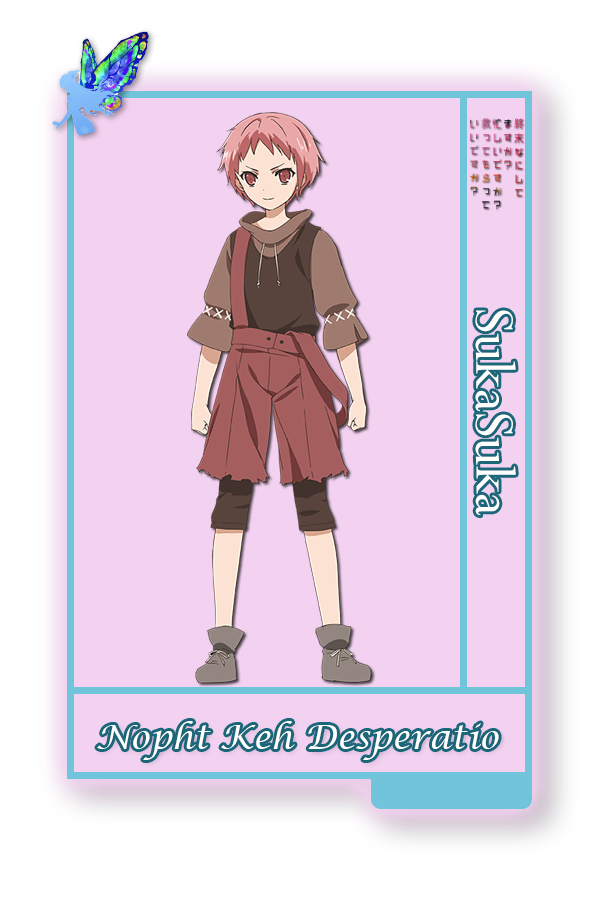
<style>
.page{position:relative;width:600px;height:900px;background:#f3d2f1}
.page>*{position:absolute;margin:0}
.t1{font:62.5px "Perpetua";color:#ffffff}
.t2{font:33.3px "LucidaCalligraphy-Italic";color:#ffffff}
</style>
<div class="page">
<p class="t1" style="left:475px;top:310px;width:41px;height:206px;rotate:90deg">SukaSuka</p>
<p class="t2" style="left:97px;top:721px;width:402px;height:39px">Nopht Keh Desperatio</p>
</div>
